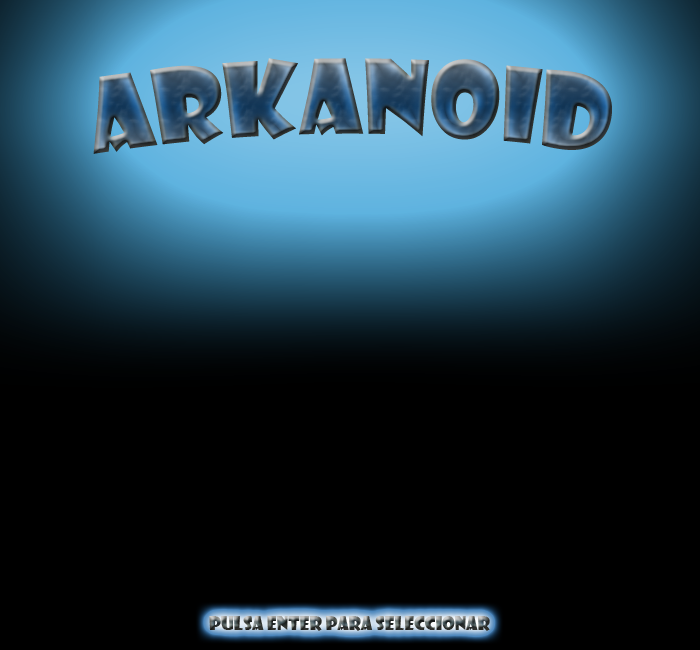
<style>
.page{position:relative;width:700px;height:650px;background:#000000}
.page>*{position:absolute;margin:0}
.t1{font:100px "ShowcardGothic-Reg"}
.t2{font:18px "ShowcardGothic-Reg"}
</style>
<div class="page">
<p class="t1" style="left:93px;top:58px;width:519px;height:96px">Arkanoid</p>
<p class="t2" style="left:209px;top:616px;width:281px;height:15px">Pulsa enter para seleccionar</p>
</div>
